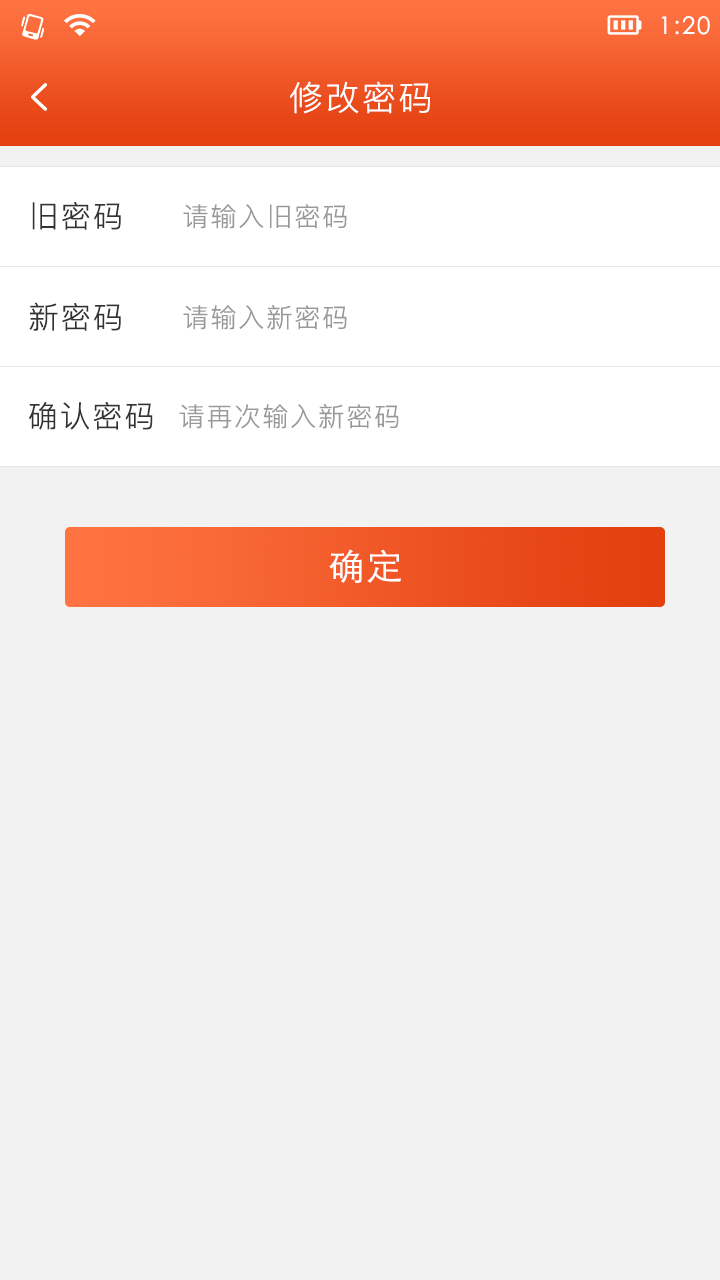
<style>
.page{position:relative;width:720px;height:1280px;background:#f2f2f2}
.page>*{position:absolute;margin:0}
.t1{font:24px "STXihei";letter-spacing:0.075em;color:#ffffff}
.t2{font:34px "PingFangSC-Light";letter-spacing:0.075em;color:#ffffff}
.t3{font:30px "PingFangSC-Light";letter-spacing:0.075em;color:#333333}
.t4{font:26px "PingFangSC-Light";letter-spacing:0.075em;color:#999999}
.t5{font:36px "STHeitiSC-Light";letter-spacing:0.075em;color:#ffffff}
</style>
<div class="page">
<p class="t1" style="left:661px;top:16px;width:49px;height:19px">1:20</p>
<p class="t2" style="left:290px;top:81px;width:140px;height:33px">修改密码</p>
<p class="t3" style="left:32px;top:202px;width:89px;height:28px">旧密码</p>
<p class="t4" style="left:183px;top:204px;width:164px;height:25px">请输入旧密码</p>
<p class="t3" style="left:29px;top:302px;width:92px;height:29px">新密码</p>
<p class="t4" style="left:183px;top:305px;width:164px;height:25px">请输入新密码</p>
<p class="t3" style="left:29px;top:402px;width:124px;height:28px">确认密码</p>
<p class="t4" style="left:179px;top:404px;width:220px;height:25px">请再次输入新密码</p>
<p class="t5" style="left:329px;top:549px;width:72px;height:34px">确定</p>
</div>
